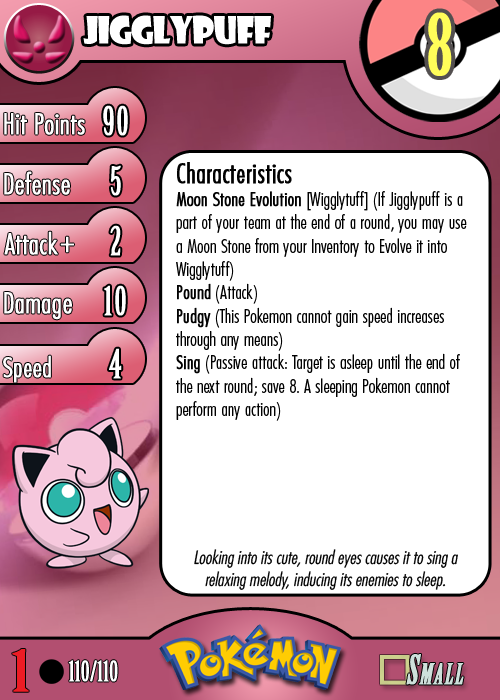
<style>
.page{position:relative;width:500px;height:700px;background:#ffffff}
.page>*{position:absolute;margin:0}
.t1{font:36.7px "ShowcardGothic-Reg";letter-spacing:-0.025em;color:#ffffff;scale:0.91 1}
.t2{font:83.3px "BirchStd";letter-spacing:0.025em;color:#fffd59;font-weight:bold}
.t3{font:27.8px "Futura-CondensedLight";color:#ffffff;font-weight:bold}
.t4{font:38.9px "BirchStd";letter-spacing:0.035em;color:#ffffff;font-weight:bold}
.t5{font:19.4px "FuturaCondensedBQ-Light";color:#010101}
.t6{font:27.8px "FuturaCondensedBQ-Light";color:#010101;font-weight:bold}
.t7{font:19.4px "FuturaCondensedBQ-Light";color:#010101;font-weight:bold}
.t8{font:30.6px "Futura-CondensedLight";color:#ffffff;font-weight:bold}
.t9{font:27.8px "FuturaCondensedBQ-Light";color:#ffffff;font-weight:bold}
.t10{font:18.1px "Futura-CondensedLight";color:#010101;font-style:italic}
.t11{font:55.6px "BirchStd";color:#ed1c24;font-weight:bold;scale:1.5 1}
.t12{font:27.8px "BirchStd";color:#ffffff;font-weight:bold}
</style>
<div class="page">
<p class="t1" style="left:83px;top:15px;width:188px;height:30px">jigglypuff</p>
<p class="t2" style="left:428px;top:12px;width:24px;height:64px">8</p>
<p class="t3" style="left:4px;top:113px;width:81px;height:22px">Hit Points</p>
<p class="t4" style="left:103px;top:105px;width:25px;height:31px">90</p>
<p class="t3" style="left:4px;top:171px;width:66px;height:24px">Defense</p>
<p class="t4" style="left:111px;top:165px;width:10px;height:31px">5</p>
<p class="t5" style="left:176px;top:162px;width:291px;height:259px"><span class="t6">Characteristics<br></span><span class="t7">Moon Stone Evolution </span>[Wigglytuff] (If Jigglypuff is a part of your team at the end of a round, you may use a Moon Stone from your Inventory to Evolve it into Wigglytuff)<br><span class="t7">Pound</span> (Attack)<br><span class="t7">Pudgy</span> (This Pokemon cannot gain speed increases through any means)<br><span class="t7">Sing</span> (Passive attack: Target is asleep until the end of the next round; save 8. A sleeping Pokemon cannot perform any action)</p>
<p class="t3" style="left:4px;top:231px;width:54px;height:24px">Attack</p>
<p class="t4" style="left:110px;top:225px;width:11px;height:31px">2</p>
<p class="t8" style="left:60px;top:236px;width:14px;height:17px">+</p>
<p class="t3" style="left:4px;top:292px;width:68px;height:28px">Damage</p>
<p class="t4" style="left:104px;top:285px;width:22px;height:31px">10</p>
<p class="t4" style="left:109px;top:348px;width:13px;height:31px">4</p>
<p class="t9" style="left:3px;top:355px;width:48px;height:28px">Speed</p>
<p class="t10" style="left:194px;top:549px;width:264px;height:41px;text-align:center">Looking into its cute, round eyes causes it to sing a relaxing melody, inducing its enemies to sleep.</p>
<p class="t11" style="left:12px;top:649px;width:17px;height:43px">1</p>
<p class="t12" style="left:68px;top:660px;width:50px;height:22px">110/110</p>
</div>
